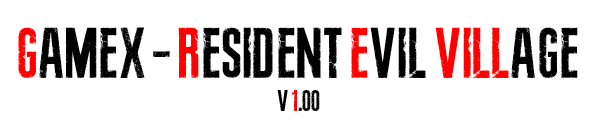
<style>
.page{position:relative;width:596px;height:138px;background:#ffffff}
.page>*{position:absolute;margin:0}
.t1{font:72px "ResidentEvil3RemakeFont";color:#000000}
.t2{font:72px "ResidentEvil3RemakeFont";color:#ff0000}
.t3{font:30px "ResidentEvil3RemakeFont";color:#010101}
.t4{font:30px "ResidentEvil3RemakeFont";color:#000000}
.t5{font:30px "ResidentEvil3RemakeFont";color:#ff0000}
</style>
<div class="page">
<p class="t1" style="left:18px;top:27px;width:560px;height:51px"><span class="t2">G</span>amex - <span class="t2">R</span>esident <span class="t2">e</span>vil <span class="t2">vill</span>age</p>
<p class="t3" style="left:277px;top:90px;width:43px;height:21px"><span class="t4">  v </span><span class="t5">1</span>.00</p>
</div>
